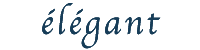
<style>
.page{position:relative;width:200px;height:50px;background:#ffffff}
.page>*{position:absolute;margin:0}
.t1{font:35.5px "Apple-Chancery";letter-spacing:0.1em;color:#173d58;scale:0.95 1}
</style>
<div class="page">
<p class="t1" style="left:42px;top:3px;width:119px;height:46px">élégant</p>
<p class="t1" style="left:42px;top:3px;width:119px;height:46px">élégant</p>
<p class="t1" style="left:42px;top:3px;width:119px;height:46px">élégant</p>
</div>
